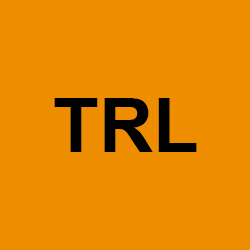
<style>
.page{position:relative;width:250px;height:250px;background:#ef8d01}
.page>*{position:absolute;margin:0}
.t1{font:75px "Arial-BoldMT";color:#000000}
</style>
<div class="page">
<p class="t1" style="left:54px;top:98px;width:143px;height:54px">TRL</p>
</div>
